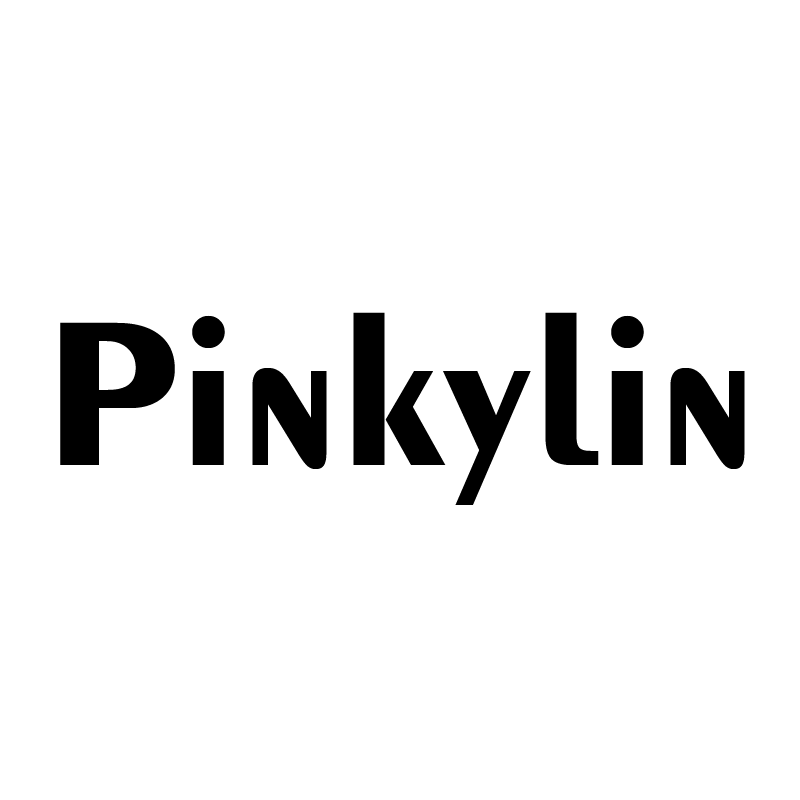
<style>
.page{position:relative;width:800px;height:800px;background:#ffffff}
.page>*{position:absolute;margin:0}
.t1{font:218px "Exotic350BT-Bold";color:#010101}
</style>
<div class="page">
<p class="t1" style="left:60px;top:312px;width:685px;height:193px">Pinkylin</p>
</div>
